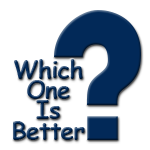
<style>
.page{position:relative;width:150px;height:150px;background:#ffffff}
.page>*{position:absolute;margin:0}
.t1{font:24.2px/20.2px "ComicSansMS-Bold";letter-spacing:-0.025em}
</style>
<div class="page">
<p class="t1" style="left:13px;top:59px;width:72px;height:81px;text-align:center">Which<br>One<br>Is<br>Better</p>
</div>
